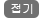
<style>
.page{position:relative;width:43px;height:18px;background:#707070}
.page>*{position:absolute;margin:0}
.t1{font:12px "Gulim";color:#ffffff}
</style>
<div class="page">
<p class="t1" style="left:11px;top:4px;width:22px;height:10px">접기</p>
</div>
